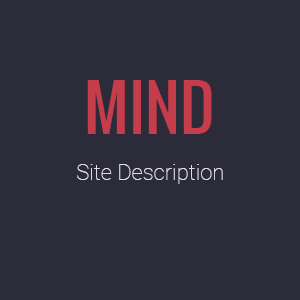
<style>
.page{position:relative;width:300px;height:300px;background:#2b2b3a}
.page>*{position:absolute;margin:0}
.t1{font:62px "Oswald-Regular";color:#c53c4a}
.t2{font:22px "Roboto-Thin";color:#e0dde7}
</style>
<div class="page">
<p class="t1" style="left:87px;top:80px;width:125px;height:54px">MIND</p>
<p class="t2" style="left:77px;top:164px;width:146px;height:20px">Site Description</p>
</div>
